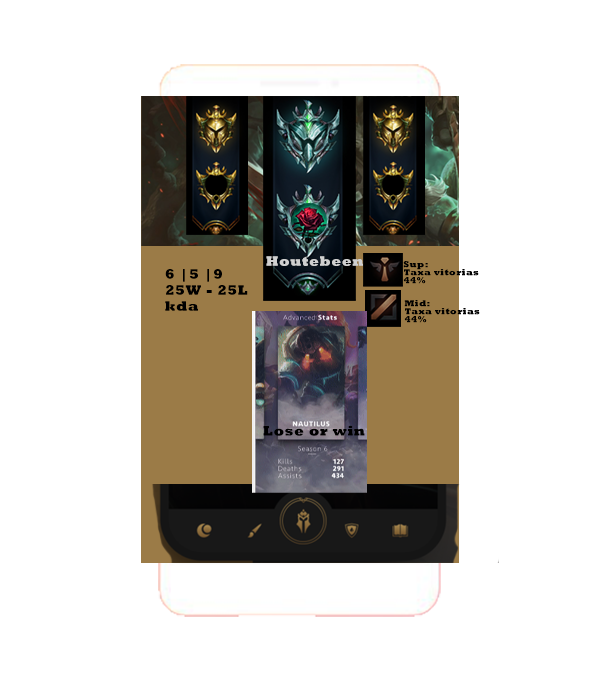
<style>
.page{position:relative;width:600px;height:700px;background:#ffffff}
.page>*{position:absolute;margin:0}
.t1{font:14px "Rockwell-ExtraBold";letter-spacing:0.05em;color:#d0d0d0}
.t2{font:14px/16px "Rockwell-ExtraBold";letter-spacing:0.05em;color:#000000}
.t3{font:14px/45px "Rockwell-ExtraBold";letter-spacing:0.05em;color:#000000}
.t4{font:9px/8px "Rockwell-ExtraBold";letter-spacing:0.05em;color:#000000}
.t5{font:14px "Rockwell-ExtraBold";letter-spacing:0.05em;color:#000000}
</style>
<div class="page">
<p class="t1" style="left:266px;top:256px;width:97px;height:10px">Houtebeen</p>
<p class="t2" style="left:165px;top:269px;width:83px;height:42px">6 |5 |9 <br>25W - 25L <br>kda<br><span class="t3"><br>25</span></p>
<p class="t4" style="left:403px;top:261px;width:76px;height:23px">Sup:<br>Taxa vitorias <br>44%</p>
<p class="t4" style="left:404px;top:300px;width:76px;height:23px">Mid:<br>Taxa vitorias <br>44%</p>
<p class="t5" style="left:263px;top:425px;width:102px;height:11px">Lose or win</p>
</div>
